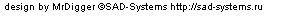
<style>
.page{position:relative;width:300px;height:25px;background:#ffffff}
.page>*{position:absolute;margin:0}
.t1{font:10px "ArialMT";color:#000000}
</style>
<div class="page">
<p class="t1" style="left:5px;top:3px;width:257px;height:9px">design by MrDigger ©SAD-Systems http://sad-systems.ru</p>
</div>
